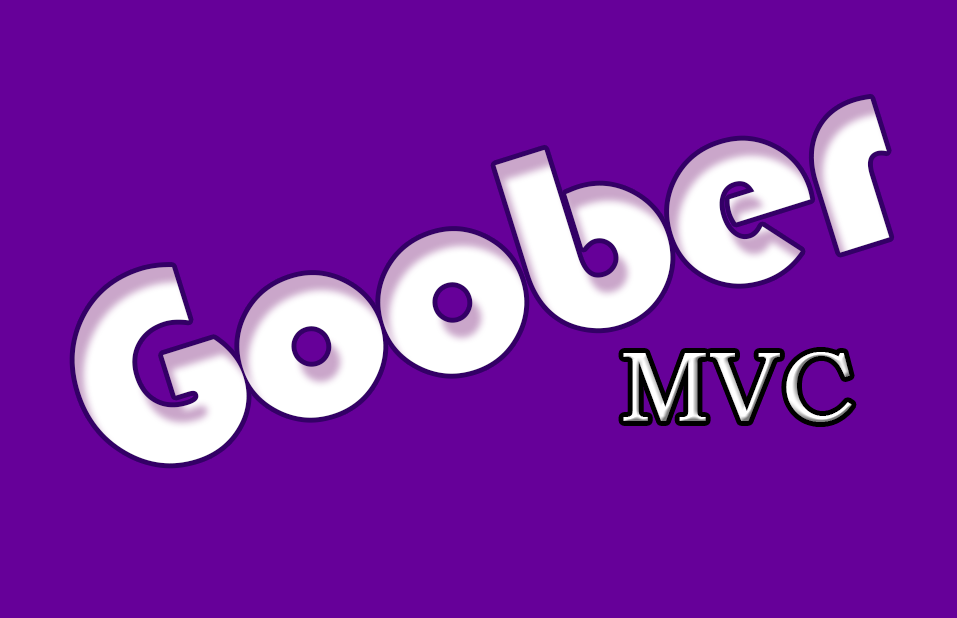
<style>
.page{position:relative;width:957px;height:618px;background:#660099}
.page>*{position:absolute;margin:0}
.t1{font:280px "Bauhaus93";letter-spacing:-0.03em;color:#ffffff}
.t2{font:100px "BookmanOldStyle";color:#ffffff}
</style>
<div class="page">
<p class="t1" style="left:74px;top:98px;width:816px;height:366px;rotate:-17deg">Goober</p>
<p class="t2" style="left:623px;top:352px;width:229px;height:70px">MVC</p>
</div>
